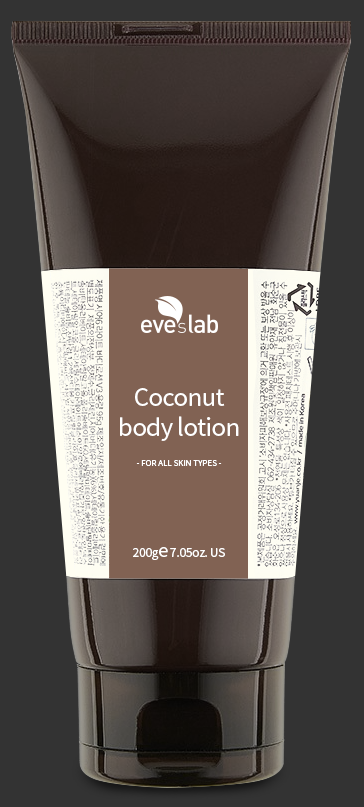
<style>
.page{position:relative;width:364px;height:807px;background:#333333}
.page>*{position:absolute;margin:0}
.t1{font:24px/30px "NotoSansKR-Regular";letter-spacing:-0.025em;color:#ffffff}
.t2{font:8px "NotoSansKR-Regular";color:#ffffff}
.t3{font:12px "NotoSansKR-Regular";letter-spacing:-0.025em;color:#ffffff}
.t4{font:18px "NotoSansKR-Regular";letter-spacing:-0.025em;color:#ffffff}
</style>
<div class="page">
<p class="t1" style="left:120px;top:388px;width:119px;height:53px;text-align:center">Coconut<br>body lotion</p>
<p class="t2" style="left:136px;top:460px;width:86px;height:6px">- FOR ALL SKIN TYPES -</p>
<p class="t3" style="left:133px;top:547px;width:92px;height:13px">200g<span class="t4">e</span> 7.05oz. US</p>
</div>
